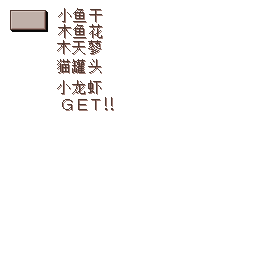
<style>
.page{position:relative;width:256px;height:256px;background:#ffffff}
.page>*{position:absolute;margin:0}
.t1{font:15px "SimSun";letter-spacing:0.02em;color:#503830}
</style>
<div class="page">
<p class="t1" style="left:58px;top:8px;width:44px;height:14px">小鱼干</p>
<p class="t1" style="left:58px;top:24px;width:44px;height:14px">木鱼花</p>
<p class="t1" style="left:57px;top:40px;width:44px;height:14px">木天蓼</p>
<p class="t1" style="left:57px;top:59px;width:44px;height:14px">猫罐头</p>
<p class="t1" style="left:57px;top:80px;width:44px;height:14px">小龙虾</p>
</div>
